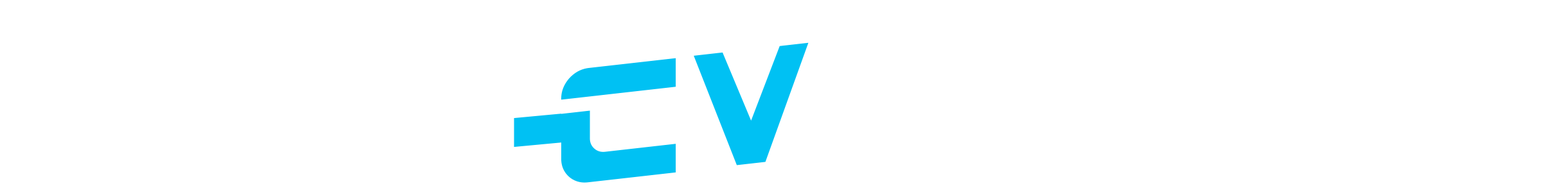
<style>
.page{position:relative;width:1568px;height:186px;background:#ffffff}
.page>*{position:absolute;margin:0}
.t1{font:127.2px "NDLOGOS";color:#00c1f3}
</style>
<div class="page">
<p class="t1" style="left:561px;top:42px;width:248px;height:141px;rotate:-6deg">cv</p>
</div>
